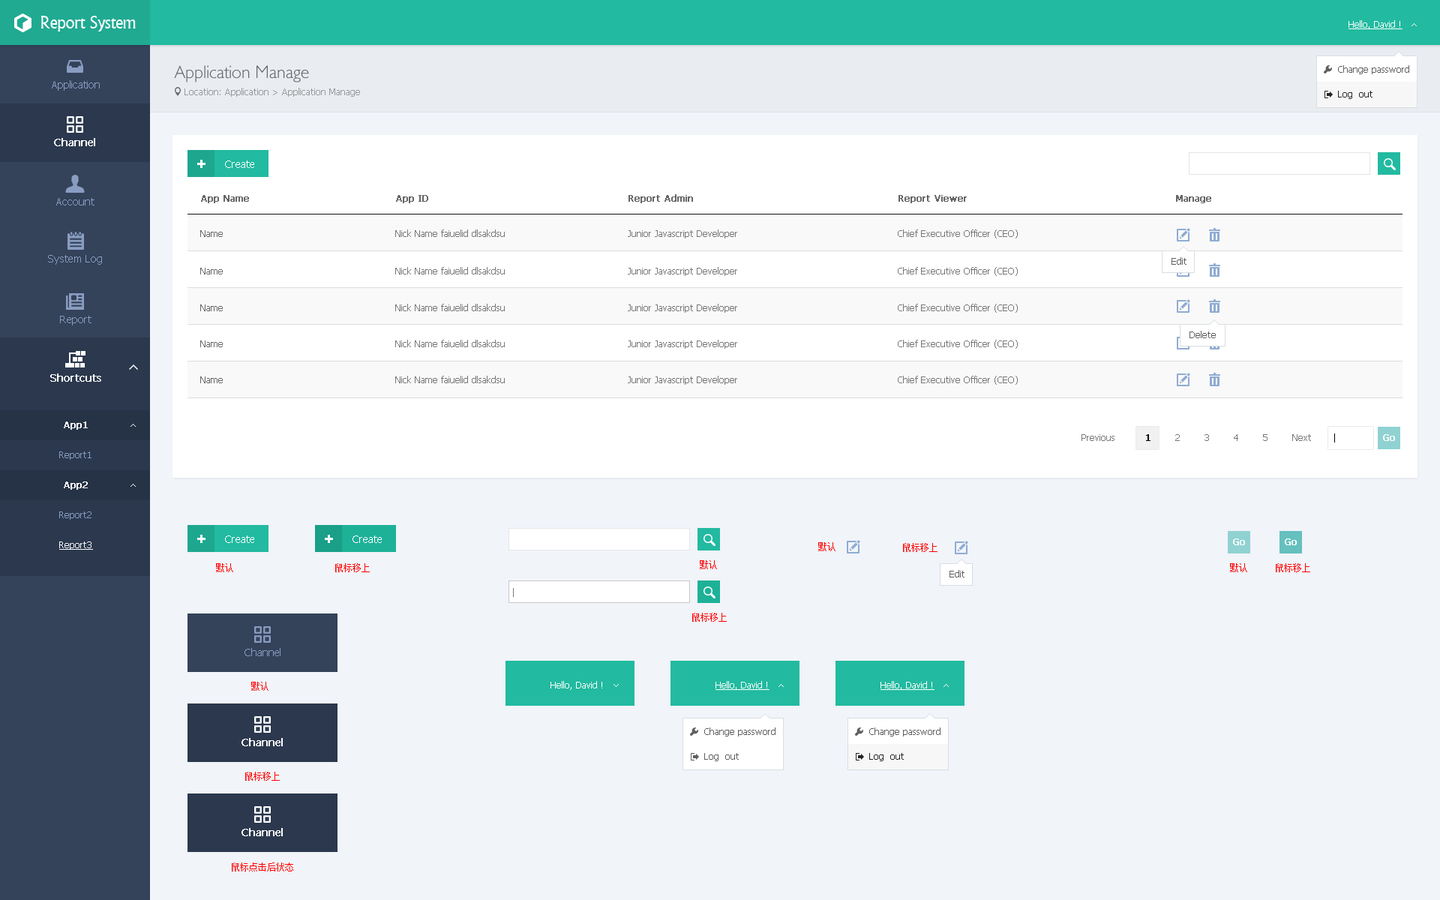
<style>
.page{position:relative;width:1440px;height:900px;background:#f1f4f9}
.page>*{position:absolute;margin:0}
.t1{font:18px "Narkisim";letter-spacing:-0.022em;color:#ffffff}
.t2{font:9px "Tahoma";color:#ffffff;text-decoration:underline}
.t3{font:18px "084-CAI978";color:#666666}
.t4{font:9px "Tahoma";color:#5f5f5f}
.t5{font:10.5px "Tahoma";color:#899dc1}
.t6{font:9px "Tahoma";color:#999999}
.t7{font:9px "Tahoma";color:#262626}
.t8{font:10.5px "Tahoma";color:#ffffff;font-weight:bold}
.t9{font:10.5px "Tahoma";color:#ffffff}
.t10{font:9px "Tahoma";color:#666666;font-weight:bold}
.t11{font:9px "Tahoma";color:#666666}
.t12{font:9px "Tahoma";color:#777777}
.t13{font:9px "Tahoma";color:#ffffff;font-weight:bold}
.t14{font:9px "Tahoma";color:#000000;font-weight:bold}
.t15{font:9px "Tahoma";color:#899dc1}
.t16{font:9px "SimSun";color:#ff0000}
.t17{font:9px "Tahoma";color:#ffffff}
</style>
<div class="page">
<p class="t1" style="left:40px;top:16px;width:96px;height:16px">Report System</p>
<p class="t2" style="left:1348px;top:20px;width:54px;height:9px">Hello, David !</p>
<p class="t3" style="left:174px;top:65px;width:135px;height:17px">Application Manage</p>
<p class="t4" style="left:1338px;top:65px;width:71px;height:9px">Change password</p>
<p class="t5" style="left:52px;top:80px;width:48px;height:11px">Application</p>
<p class="t6" style="left:184px;top:88px;width:176px;height:9px">Location: Application &gt; Application Manage</p>
<p class="t7" style="left:1338px;top:91px;width:34px;height:8px">Log  out</p>
<p class="t8" style="left:54px;top:138px;width:41px;height:8px">Channel</p>
<p class="t9" style="left:225px;top:160px;width:29px;height:8px">Create</p>
<p class="t5" style="left:56px;top:198px;width:38px;height:8px">Account</p>
<p class="t10" style="left:201px;top:195px;width:48px;height:8px">App Name</p>
<p class="t10" style="left:396px;top:195px;width:32px;height:8px">App ID</p>
<p class="t10" style="left:628px;top:194px;width:65px;height:9px">Report Admin</p>
<p class="t10" style="left:898px;top:195px;width:69px;height:8px">Report Viewer</p>
<p class="t10" style="left:1176px;top:195px;width:35px;height:8px">Manage</p>
<p class="t11" style="left:200px;top:230px;width:23px;height:7px">Name</p>
<p class="t12" style="left:395px;top:230px;width:110px;height:7px">Nick Name faiuelid dlsakdsu</p>
<p class="t12" style="left:628px;top:230px;width:109px;height:8px">Junior Javascript Developer</p>
<p class="t12" style="left:898px;top:230px;width:120px;height:8px">Chief Executive Officer (CEO)</p>
<p class="t5" style="left:48px;top:255px;width:54px;height:10px">System Log</p>
<p class="t4" style="left:1172px;top:257px;width:14px;height:8px">Edit</p>
<p class="t11" style="left:200px;top:268px;width:23px;height:6px">Name</p>
<p class="t12" style="left:395px;top:267px;width:110px;height:7px">Nick Name faiuelid dlsakdsu</p>
<p class="t12" style="left:628px;top:267px;width:109px;height:9px">Junior Javascript Developer</p>
<p class="t12" style="left:898px;top:267px;width:120px;height:9px">Chief Executive Officer (CEO)</p>
<p class="t11" style="left:200px;top:304px;width:23px;height:7px">Name</p>
<p class="t12" style="left:395px;top:304px;width:110px;height:7px">Nick Name faiuelid dlsakdsu</p>
<p class="t12" style="left:628px;top:304px;width:109px;height:9px">Junior Javascript Developer</p>
<p class="t12" style="left:898px;top:304px;width:120px;height:9px">Chief Executive Officer (CEO)</p>
<p class="t5" style="left:60px;top:316px;width:32px;height:10px">Report</p>
<p class="t11" style="left:200px;top:340px;width:23px;height:7px">Name</p>
<p class="t12" style="left:395px;top:340px;width:110px;height:7px">Nick Name faiuelid dlsakdsu</p>
<p class="t12" style="left:628px;top:340px;width:109px;height:9px">Junior Javascript Developer</p>
<p class="t12" style="left:898px;top:340px;width:120px;height:9px">Chief Executive Officer (CEO)</p>
<p class="t4" style="left:1190px;top:331px;width:26px;height:7px">Delete</p>
<p class="t8" style="left:50px;top:374px;width:51px;height:8px">Shortcuts</p>
<p class="t11" style="left:200px;top:376px;width:23px;height:7px">Name</p>
<p class="t12" style="left:395px;top:376px;width:110px;height:7px">Nick Name faiuelid dlsakdsu</p>
<p class="t12" style="left:628px;top:376px;width:109px;height:9px">Junior Javascript Developer</p>
<p class="t12" style="left:898px;top:376px;width:120px;height:9px">Chief Executive Officer (CEO)</p>
<p class="t13" style="left:64px;top:422px;width:24px;height:8px">App1</p>
<p class="t12" style="left:1082px;top:434px;width:229px;height:7px">Previous          <span class="t14">1</span>        2        3        4        5        Next</p>
<p class="t13" style="left:1383px;top:434px;width:12px;height:7px">Go</p>
<p class="t15" style="left:59px;top:452px;width:33px;height:8px">Report1</p>
<p class="t13" style="left:64px;top:482px;width:24px;height:8px">App2</p>
<p class="t15" style="left:59px;top:512px;width:33px;height:8px">Report2</p>
<p class="t2" style="left:59px;top:542px;width:34px;height:8px">Report3</p>
<p class="t9" style="left:225px;top:536px;width:29px;height:7px">Create</p>
<p class="t9" style="left:352px;top:536px;width:30px;height:7px">Create</p>
<p class="t16" style="left:818px;top:542px;width:18px;height:9px">默认</p>
<p class="t16" style="left:903px;top:543px;width:35px;height:9px">鼠标移上</p>
<p class="t13" style="left:1233px;top:538px;width:12px;height:7px">Go</p>
<p class="t13" style="left:1285px;top:538px;width:12px;height:7px">Go</p>
<p class="t16" style="left:216px;top:563px;width:17px;height:9px">默认</p>
<p class="t16" style="left:335px;top:563px;width:35px;height:9px">鼠标移上</p>
<p class="t16" style="left:700px;top:560px;width:17px;height:9px">默认</p>
<p class="t16" style="left:1230px;top:563px;width:17px;height:9px">默认</p>
<p class="t16" style="left:1276px;top:563px;width:34px;height:9px">鼠标移上</p>
<p class="t4" style="left:950px;top:570px;width:14px;height:8px">Edit</p>
<p class="t16" style="left:692px;top:613px;width:35px;height:9px">鼠标移上</p>
<p class="t5" style="left:244px;top:648px;width:36px;height:8px">Channel</p>
<p class="t16" style="left:251px;top:682px;width:17px;height:9px">默认</p>
<p class="t17" style="left:550px;top:681px;width:52px;height:9px">Hello, David !</p>
<p class="t2" style="left:716px;top:681px;width:54px;height:9px">Hello, David !</p>
<p class="t2" style="left:880px;top:681px;width:54px;height:9px">Hello, David !</p>
<p class="t4" style="left:704px;top:728px;width:72px;height:8px">Change password</p>
<p class="t4" style="left:869px;top:728px;width:71px;height:8px">Change password</p>
<p class="t8" style="left:242px;top:738px;width:41px;height:8px">Channel</p>
<p class="t4" style="left:704px;top:753px;width:35px;height:8px">Log  out</p>
<p class="t7" style="left:869px;top:753px;width:35px;height:8px">Log  out</p>
<p class="t16" style="left:245px;top:772px;width:35px;height:9px">鼠标移上</p>
<p class="t8" style="left:242px;top:828px;width:41px;height:8px">Channel</p>
<p class="t16" style="left:232px;top:862px;width:61px;height:10px">鼠标点击后状态</p>
</div>
